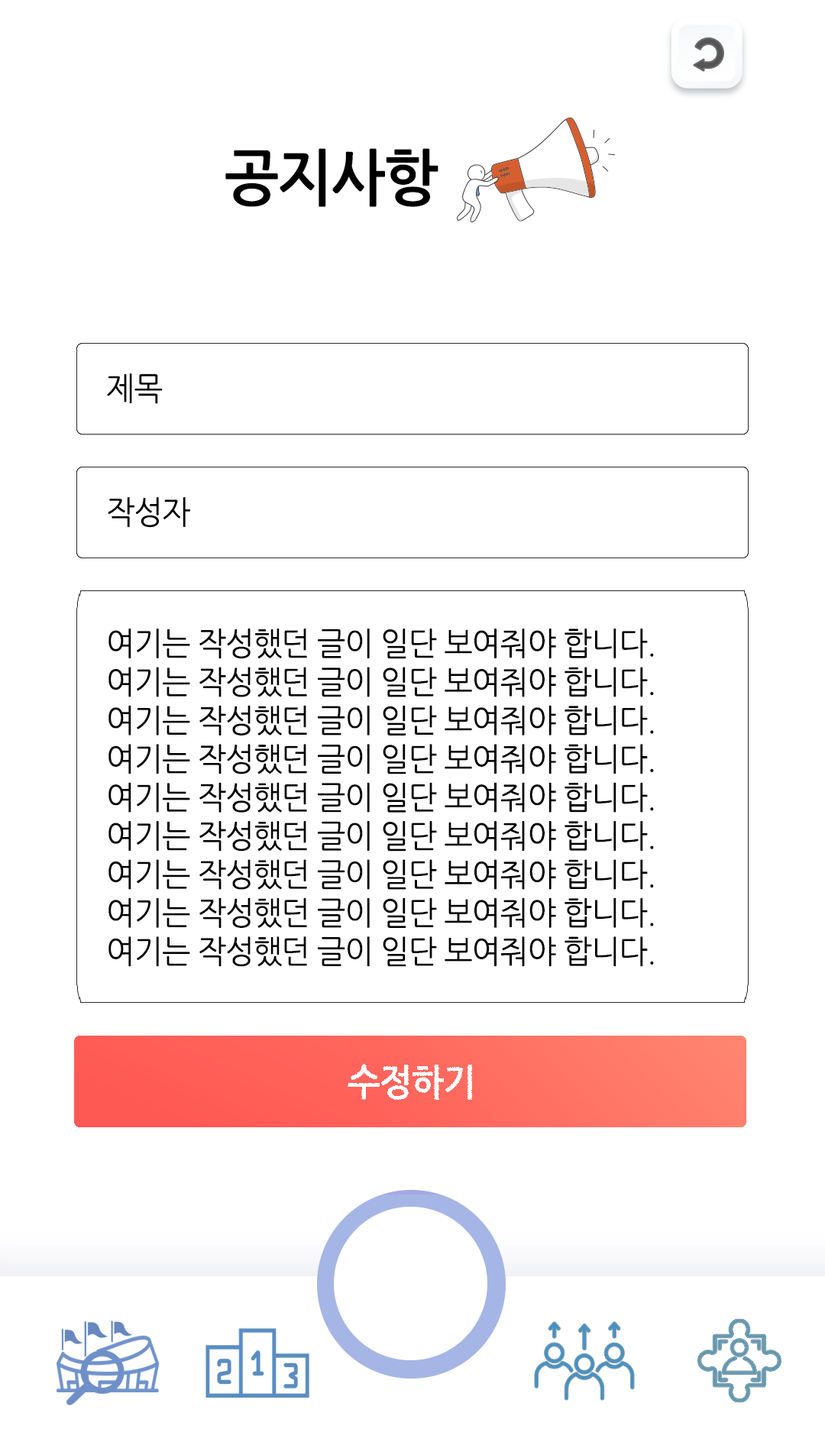
<style>
.page{position:relative;width:825px;height:1445px;background:#ffffff}
.page>*{position:absolute;margin:0}
.t1{font:61.1px "NanumGothicBold";letter-spacing:-0.025em;color:#000000;scale:0.95 1}
.t2{font:32.1px "NanumGothic";letter-spacing:-0.025em;color:#000000;scale:0.95 1}
.t3{font:36.7px "NanumGothicBold";letter-spacing:-0.025em;color:#ffffff;scale:0.95 1}
</style>
<div class="page">
<p class="t1" style="left:225px;top:148px;width:213px;height:59px">공지사항</p>
<p class="t2" style="left:107px;top:374px;width:55px;height:30px">제목</p>
<p class="t2" style="left:108px;top:497px;width:82px;height:31px">작성자</p>
<p class="t2" style="left:108px;top:629px;width:546px;height:338px">여기는 작성했던 글이 일단 보여줘야 합니다.<br>여기는 작성했던 글이 일단 보여줘야 합니다.<br>여기는 작성했던 글이 일단 보여줘야 합니다.<br>여기는 작성했던 글이 일단 보여줘야 합니다.<br>여기는 작성했던 글이 일단 보여줘야 합니다.<br>여기는 작성했던 글이 일단 보여줘야 합니다.<br>여기는 작성했던 글이 일단 보여줘야 합니다.<br>여기는 작성했던 글이 일단 보여줘야 합니다.<br>여기는 작성했던 글이 일단 보여줘야 합니다.</p>
<p class="t3" style="left:348px;top:1064px;width:124px;height:36px">수정하기</p>
</div>
